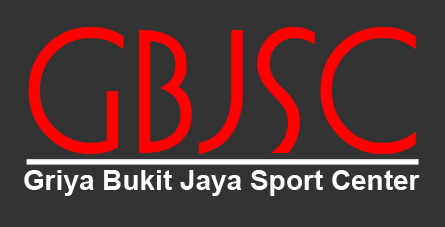
<style>
.page{position:relative;width:445px;height:227px;background:#333333}
.page>*{position:absolute;margin:0}
.t1{font:164.2px "BusoramaITCbyBT-Medium";color:#ff0000}
.t2{font:28px "Arial-BoldMT";color:#ffffff}
</style>
<div class="page">
<p class="t1" style="left:28px;top:27px;width:388px;height:127px">GBJSC</p>
<p class="t2" style="left:24px;top:170px;width:396px;height:26px">Griya Bukit Jaya Sport Center</p>
</div>
